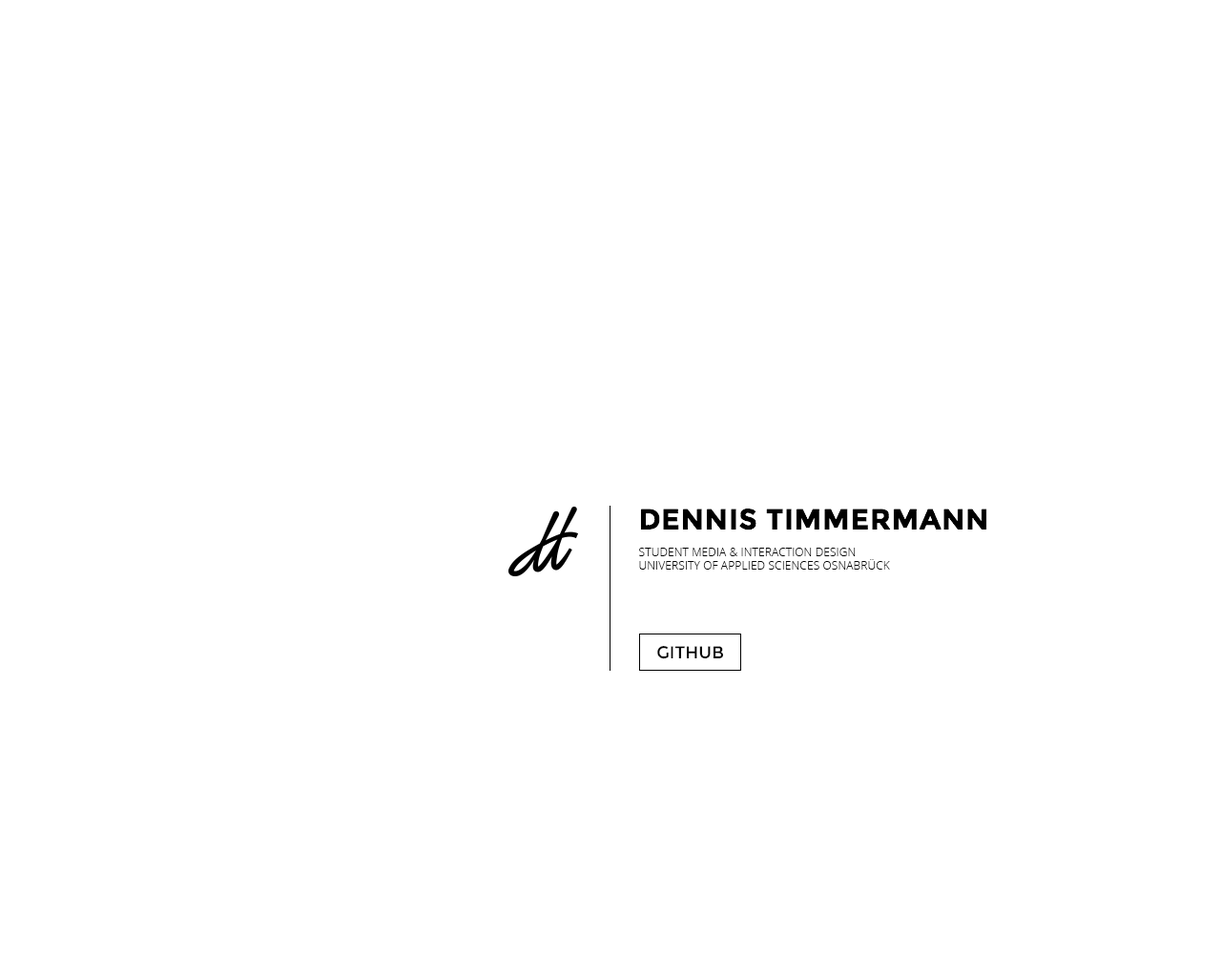
<style>
.page{position:relative;width:1221px;height:977px;background:#ffffff}
.page>*{position:absolute;margin:0}
.t1{font:28.6px "Montserrat-Bold";letter-spacing:0.025em;color:#000000;text-transform:uppercase}
.t2{font:11.4px "OpenSans-Light";letter-spacing:0.01em;color:#000000;text-transform:uppercase}
.t3{font:17.2px "Montserrat-Regular";color:#000000;text-transform:uppercase}
</style>
<div class="page">
<p class="t1" style="left:640px;top:508px;width:347px;height:22px">Dennis Timmermann</p>
<p class="t2" style="left:639px;top:547px;width:251px;height:22px">Student Media &amp; Interaction Design<br>University of Applied Sciences Osnabrück</p>
<p class="t3" style="left:657px;top:646px;width:66px;height:13px">github</p>
</div>
